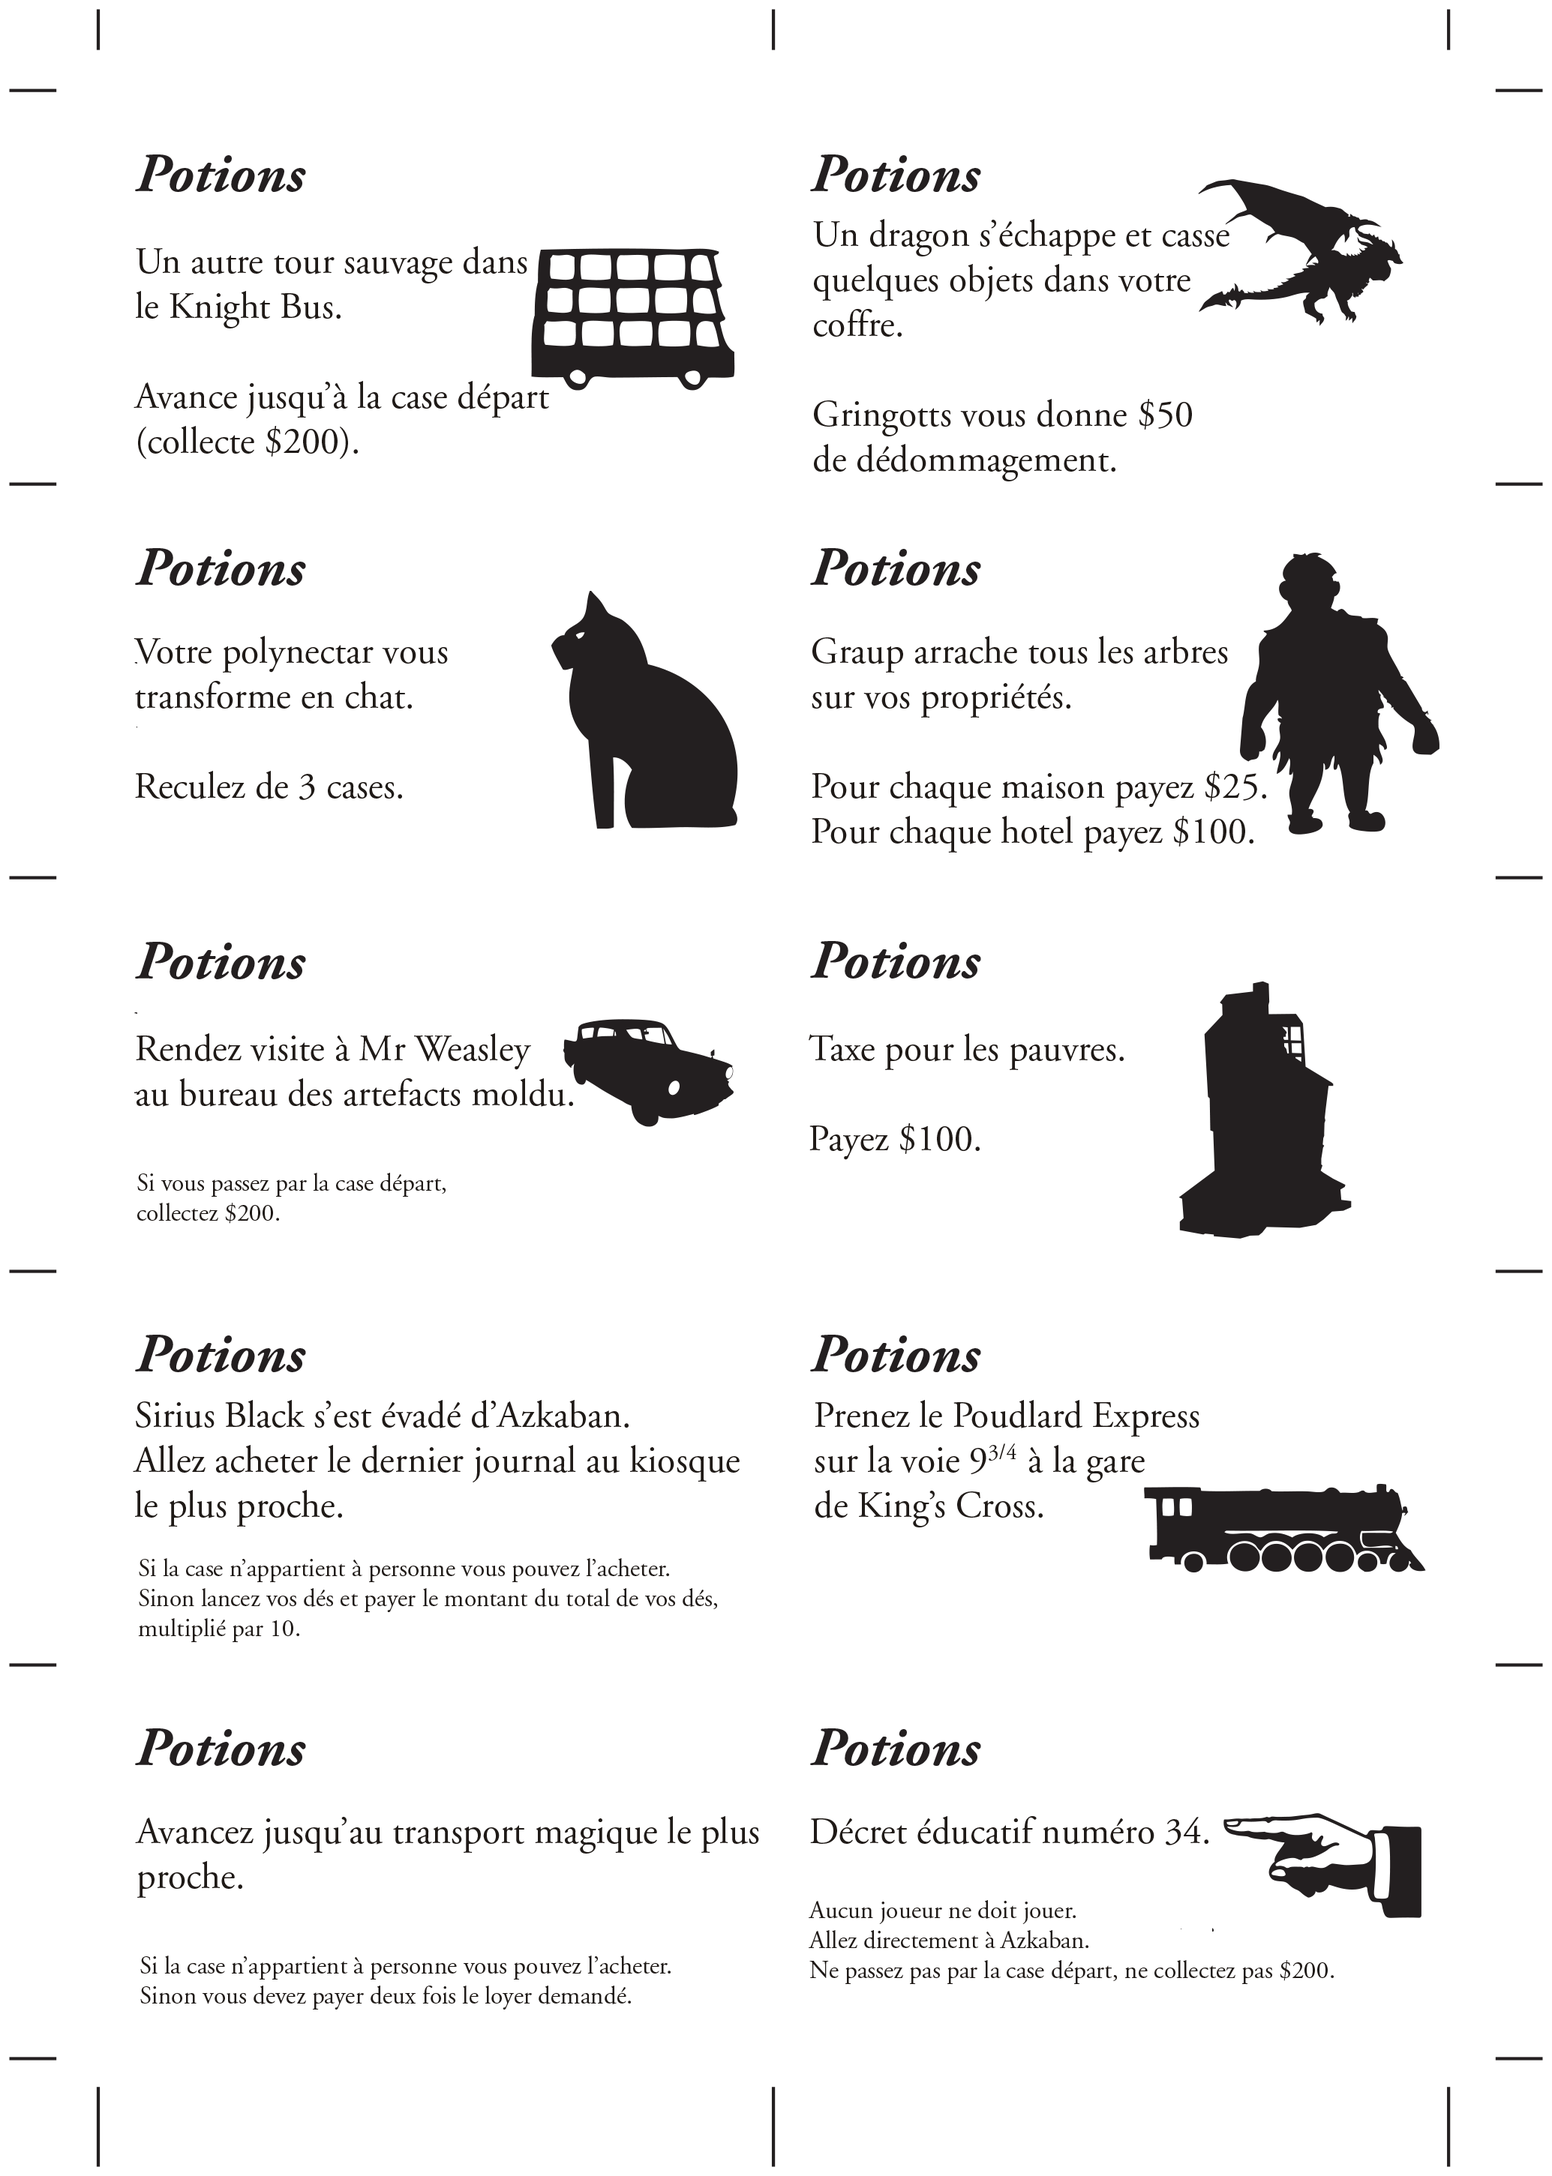
<style>
.page{position:relative;width:1552px;height:2176px;background:#ffffff}
.page>*{position:absolute;margin:0}
.t1{font:9px "AGaramond-Regular";color:#1f1a17}
.t2{font:37.5px "AGaramond-Regular";color:#1f1a17}
.t3{font:25px "AGaramond-Regular";color:#1f1a17}
</style>
<div class="page">
<p class="t1" style="left:813px;top:219px;width:416px;height:263px">Un dragon s’échappe et casse<br>quelques objets dans votre<br>coffre.<br><br>Gringotts vous donne $50<br>de dédommagement.</p>
<p class="t1" style="left:134px;top:246px;width:415px;height:214px">Un autre tour sauvage dans<br>le Knight Bus.<br><br>Avance jusqu’à la case départ<br>(collecte $200).</p>
<p class="t1" style="left:134px;top:636px;width:314px;height:164px">Votre polynectar vous<br>transforme en chat.<br><br>Reculez de 3 cases.</p>
<p class="t1" style="left:812px;top:636px;width:454px;height:217px">Graup arrache tous les arbres<br>sur vos propriétés.<br><br>Pour chaque maison payez $25.<br>Pour chaque hotel payez $100.</p>
<p class="t1" style="left:136px;top:1034px;width:437px;height:73px">Rendez visite à Mr Weasley<br>au bureau des artefacts moldu.</p>
<p class="t2" style="left:808px;top:1034px;width:316px;height:126px">Taxe pour les pauvres.<br><br>Payez $100.</p>
<p class="t3" style="left:137px;top:1173px;width:309px;height:51px">Si vous passez par la case départ,<br>collectez $200.</p>
<p class="t1" style="left:133px;top:1400px;width:607px;height:127px">Sirius Black s’est évadé d’Azkaban.<br>Allez acheter le dernier journal au kiosque<br>le plus proche.</p>
<p class="t1" style="left:814px;top:1400px;width:385px;height:128px">Prenez le Poudlard Express<br>sur la voie 93/4  à la gare<br>de King’s Cross.</p>
<p class="t3" style="left:138px;top:1558px;width:579px;height:84px">Si la case n’appartient à personne vous pouvez l’acheter.<br>Sinon lancez vos dés et payer le montant du total de vos dés,<br>multiplié par 10.</p>
<p class="t1" style="left:135px;top:1816px;width:624px;height:82px">Avancez jusqu’au transport magique le plus<br>proche.</p>
<p class="t3" style="left:808px;top:1816px;width:526px;height:168px"><span class="t1">Décret éducatif numéro 34.<br><br></span>Aucun joueur ne doit jouer.<br>Allez directement à Azkaban.<br>Ne passez pas par la case départ, ne collectez pas $200.</p>
<p class="t3" style="left:140px;top:1956px;width:530px;height:54px">Si la case n’appartient à personne vous pouvez l’acheter.<br>Sinon vous devez payer deux fois le loyer demandé.</p>
</div>
